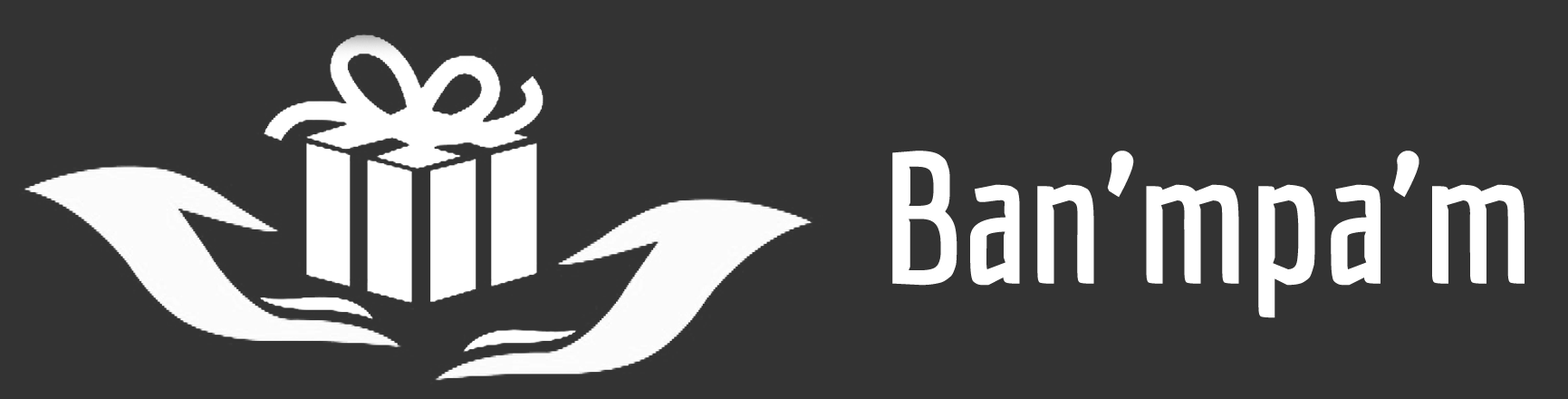
<style>
.page{position:relative;width:1568px;height:399px;background:#333333}
.page>*{position:absolute;margin:0}
.t1{font:181.2px "Economica-Bold";color:#ffffff}
</style>
<div class="page">
<p class="t1" style="left:892px;top:150px;width:633px;height:168px">Ban’mpa’m</p>
</div>
